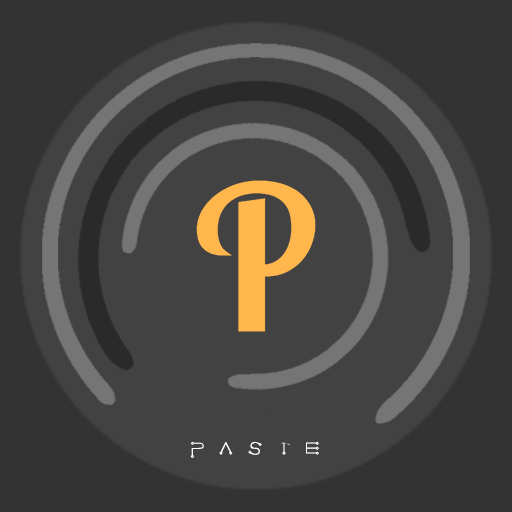
<style>
.page{position:relative;width:512px;height:512px;background:#424242}
.page>*{position:absolute;margin:0}
.t1{font:16px "CelestialNormal";letter-spacing:1em;color:#ffffff;font-weight:bold}
</style>
<div class="page">
<p class="t1" style="left:190px;top:441px;width:129px;height:17px">Paste</p>
</div>
